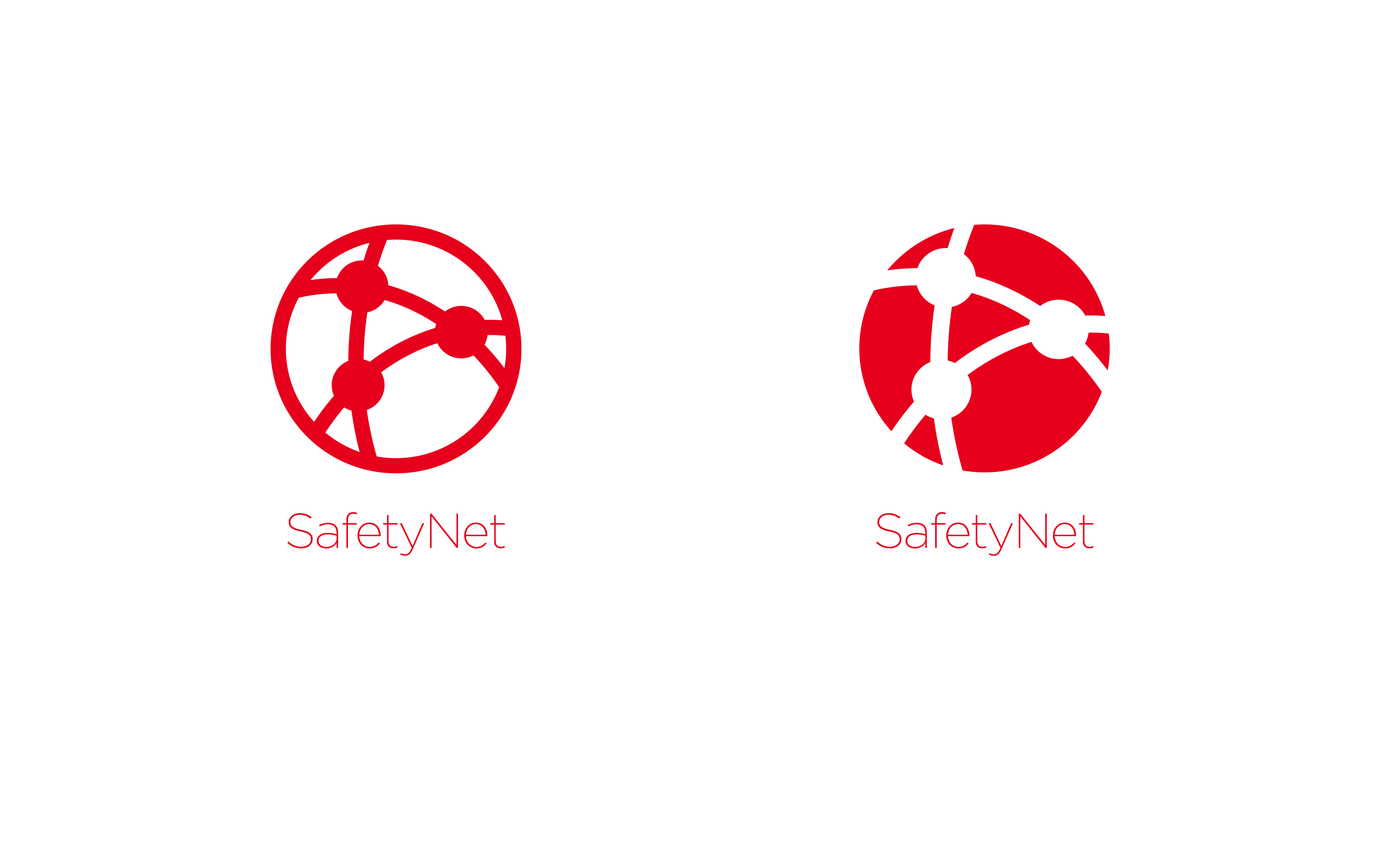
<style>
.page{position:relative;width:1400px;height:852px;background:#ffffff}
.page>*{position:absolute;margin:0}
.t1{font:48.8px "GothamExLight";letter-spacing:-0.035em;color:#e6001c}
</style>
<div class="page">
<p class="t1" style="left:287px;top:512px;width:218px;height:44px">SafetyNet</p>
<p class="t1" style="left:876px;top:512px;width:218px;height:44px">SafetyNet</p>
</div>
